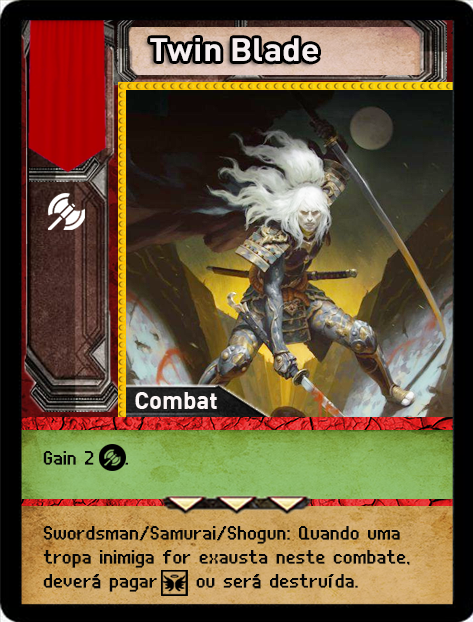
<style>
.page{position:relative;width:473px;height:622px}
.page>*{position:absolute;margin:0}
.t1{font:32px "DIN-Bold";color:#f6eff0;scale:1.06 1}
.t2{font:24px "UNDA-BitmapFine";letter-spacing:0.01em;color:#060606;font-weight:bold}
.t3{font:24px/24px "UNDA-BitmapFine";letter-spacing:0.01em;color:#060606;font-weight:bold}
</style>
<div class="page">
<p class="t1" style="left:150px;top:38px;width:168px;height:24px">Twin Blade</p>
<p class="t2" style="left:43px;top:451px;width:85px;height:14px">Gain 2    .</p>
<p class="t3" style="left:43px;top:526px;width:367px;height:66px">Swordsman/Samurai/Shogun: Quando uma tropa inimiga for exausta neste combate, deverá pagar     ou será destruída.</p>
</div>
